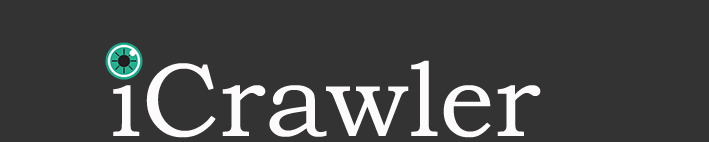
<style>
.page{position:relative;width:709px;height:142px;background:#333333}
.page>*{position:absolute;margin:0}
.t1{font:105px "BookmanOldStyle";color:#fdfbfb}
</style>
<div class="page">
<p class="t1" style="left:113px;top:60px;width:428px;height:78px">iCrawler</p>
</div>
